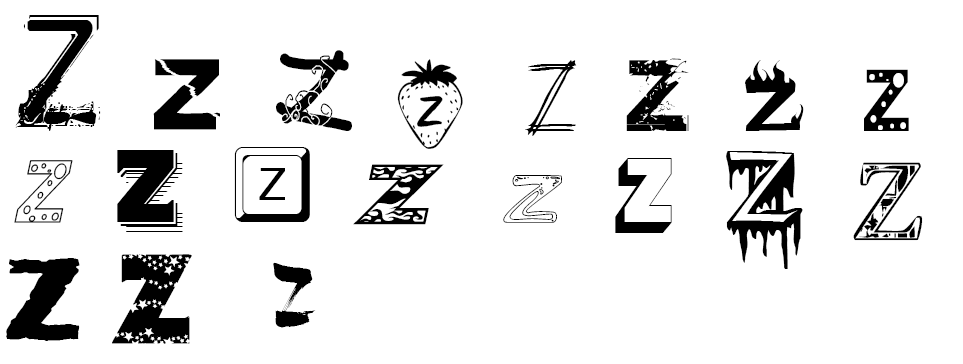
<style>
.page{position:relative;width:963px;height:364px;background:#ffffff}
.page>*{position:absolute;margin:0}
.t1{font:89.6px "Lhabia";letter-spacing:-0.02em;color:#000000}
.t2{font:89.6px "afGiHmtV*";letter-spacing:-0.02em;color:#000000}
.t3{font:89.6px "PiliEG-Ultra-GB";letter-spacing:-0.02em;color:#000000}
.t4{font:89.6px "101StrawberryDelight";letter-spacing:-0.02em;color:#000000}
.t5{font:89.6px "2ProngTree";letter-spacing:-0.02em;color:#000000}
.t6{font:89.6px "Base02";letter-spacing:-0.02em;color:#000000}
.t7{font:89.6px "Flame";letter-spacing:-0.02em;color:#000000}
.t8{font:89.6px "HOLE";letter-spacing:-0.02em;color:#000000}
.t9{font:89.6px "Hominis";letter-spacing:-0.02em;color:#000000}
.t10{font:89.6px "KeystrokeNormal";letter-spacing:-0.02em;color:#000000}
.t11{font:89.6px "HOLE3cursiveoutline";letter-spacing:-0.02em;color:#000000}
.t12{font:89.6px "PioneerITCbyBT-Regular";letter-spacing:-0.02em;color:#000000}
.t13{font:89.6px "SolsticeOfSuffering";letter-spacing:-0.02em;color:#000000}
.t14{font:89.6px "KustomKar";letter-spacing:-0.02em;color:#000000}
.t15{font:89.6px "TechnoClastic";letter-spacing:-0.02em;color:#000000}
.t16{font:89.6px "LineEtch";letter-spacing:-0.02em;color:#000000}
.t17{font:89.6px "Wizardry";letter-spacing:-0.02em;color:#000000}
.t18{font:89.6px "VulgarDisplayOfPower";letter-spacing:-0.02em;color:#000000}
.t19{font:89.6px "Shunpu";letter-spacing:-0.02em;color:#000000}
</style>
<div class="page">
<p class="t1" style="left:15px;top:15px;width:86px;height:116px">Z</p>
<p class="t2" style="left:276px;top:50px;width:76px;height:81px">Z</p>
<p class="t3" style="left:153px;top:59px;width:67px;height:71px">Z</p>
<p class="t4" style="left:397px;top:59px;width:66px;height:90px">Z</p>
<p class="t5" style="left:525px;top:60px;width:52px;height:76px">Z</p>
<p class="t6" style="left:626px;top:58px;width:63px;height:73px">Z</p>
<p class="t7" style="left:745px;top:60px;width:59px;height:71px">Z</p>
<p class="t8" style="left:864px;top:69px;width:45px;height:62px">Z</p>
<p class="t9" style="left:117px;top:150px;width:66px;height:82px">Z</p>
<p class="t10" style="left:234px;top:147px;width:76px;height:75px">Z</p>
<p class="t11" style="left:14px;top:160px;width:59px;height:63px">Z</p>
<p class="t12" style="left:615px;top:158px;width:57px;height:75px">Z</p>
<p class="t13" style="left:726px;top:151px;width:77px;height:118px">Z</p>
<p class="t14" style="left:353px;top:164px;width:91px;height:61px">Z</p>
<p class="t15" style="left:853px;top:162px;width:70px;height:79px">Z</p>
<p class="t16" style="left:503px;top:175px;width:59px;height:48px">Z</p>
<p class="t17" style="left:112px;top:254px;width:80px;height:90px">Z</p>
<p class="t18" style="left:6px;top:258px;width:74px;height:83px">Z</p>
<p class="t19" style="left:273px;top:262px;width:43px;height:66px">Z</p>
</div>
